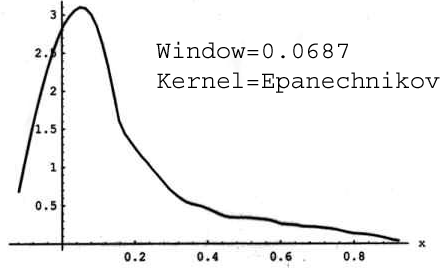
<style>
.page{position:relative;width:440px;height:270px;background:#ffffff}
.page>*{position:absolute;margin:0}
.t1{font:24.9px "Courier";color:#000000}
</style>
<div class="page">
<p class="t1" style="left:156px;top:41px;width:284px;height:52px">Window=0.0687<br>Kernel=Epanechnikov</p>
</div>
